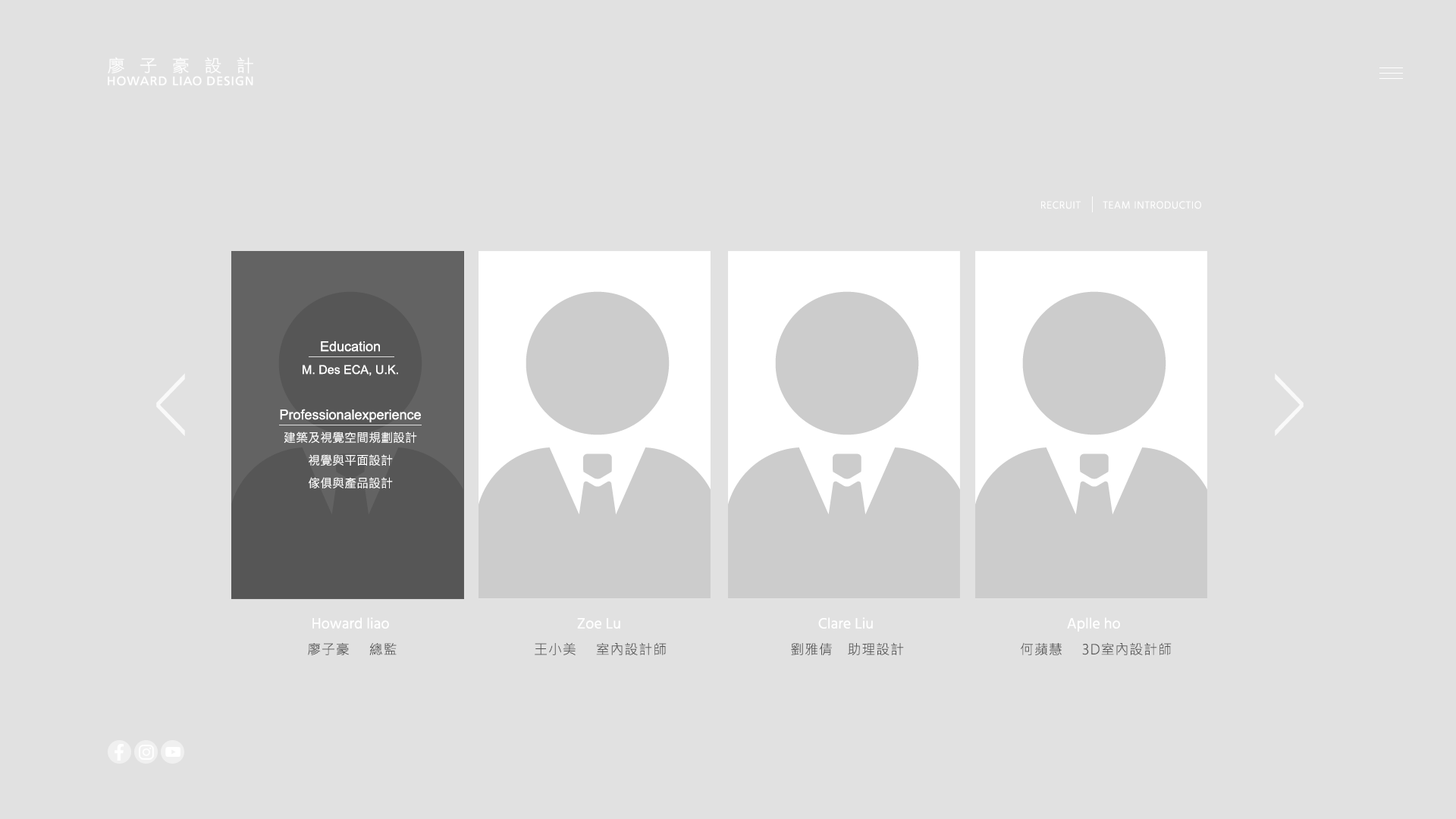
<style>
.page{position:relative;width:1456px;height:819px;background:#e1e1e1}
.page>*{position:absolute;margin:0}
.t1{font:10.6px "Hind-Light";letter-spacing:0.05em;color:#ffffff}
.t2{font:12.1px/22.7px "MicrosoftJhengHeiRegular";color:#ffffff}
.t3{font:13.6px/22.7px "ArialMT";color:#ffffff}
.t4{font:12.1px/22.7px "ArialMT";color:#ffffff}
.t5{font:124.5px "BradleyHandITC";color:#ffffff;scale:0.39 1}
.t6{font:15.2px "Hind-Regular";color:#ffffff}
.t7{font:13.6px "MicrosoftJhengHeiLight";letter-spacing:0.05em;color:#545454}
</style>
<div class="page">
<p class="t1" style="left:1041px;top:201px;width:160px;height:8px">RECRUIT       TEAM INTRODUCTIO</p>
<p class="t2" style="left:280px;top:341px;width:141px;height:147px;text-align:center"><span class="t3">Education<br></span><span class="t4">M. Des ECA, U.K.<br><br></span><span class="t3">Professionalexperience<br></span>建築及視覺空間規劃設計<br>視覺與平面設計<br>傢俱與產品設計</p>
<p class="t5" style="left:156px;top:373px;width:29px;height:63px;opacity:0.8">&lt;</p>
<p class="t5" style="left:1275px;top:373px;width:29px;height:63px;rotate:180deg;opacity:0.8">&lt;</p>
<p class="t6" style="left:312px;top:617px;width:77px;height:12px">Howard liao</p>
<p class="t6" style="left:818px;top:617px;width:55px;height:12px">Clare Liu</p>
<p class="t6" style="left:1067px;top:617px;width:53px;height:15px">Aplle ho</p>
<p class="t6" style="left:577px;top:618px;width:43px;height:11px">Zoe Lu</p>
<p class="t7" style="left:308px;top:642px;width:89px;height:13px">廖子豪    總監</p>
<p class="t7" style="left:535px;top:642px;width:132px;height:13px">王小美    室內設計師</p>
<p class="t7" style="left:791px;top:642px;width:113px;height:13px">劉雅倩   助理設計</p>
<p class="t7" style="left:1021px;top:642px;width:151px;height:13px">何蘋慧    3D室內設計師</p>
</div>
